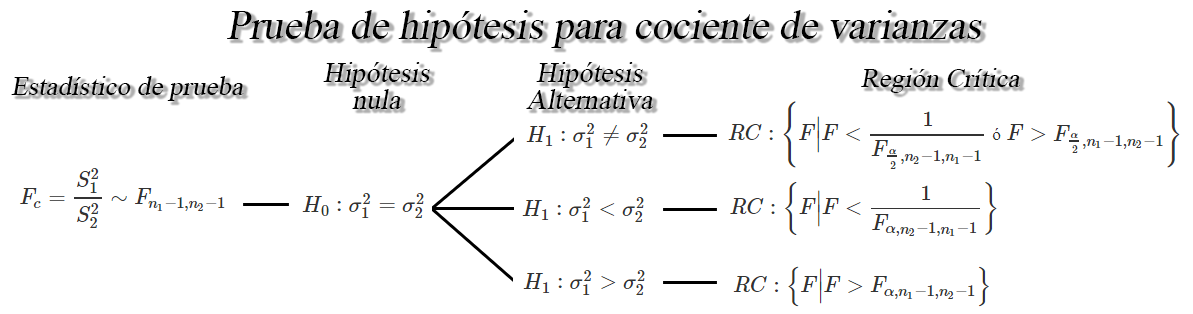
<style>
.page{position:relative;width:1193px;height:314px;background:#ffffff}
.page>*{position:absolute;margin:0}
.t1{font:30.5px "TimesNewRomanPSMT";color:#000000;font-style:italic}
.t2{font:21.1px/26.9px "TimesNewRomanPSMT";color:#000000;font-style:italic}
.t3{font:20.4px "TimesNewRomanPSMT";color:#000000;font-style:italic}
</style>
<div class="page">
<p class="t1" style="left:227px;top:10px;width:755px;height:38px">Prueba de hipótesis para cociente de varianzas</p>
<p class="t2" style="left:323px;top:62px;width:107px;height:47px;text-align:center">Hipótesis<br>nula</p>
<p class="t2" style="left:526px;top:62px;width:127px;height:47px;text-align:center">Hipótesis<br>Alternativa</p>
<p class="t3" style="left:11px;top:76px;width:233px;height:25px">Estadístico de prueba</p>
<p class="t3" style="left:861px;top:68px;width:159px;height:25px">Región Crítica</p>
</div>
